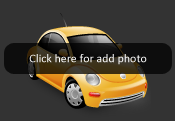
<style>
.page{position:relative;width:175px;height:121px;background:#333333}
.page>*{position:absolute;margin:0}
.t1{font:12px "Calibri";color:#ffffff}
</style>
<div class="page">
<p class="t1" style="left:29px;top:54px;width:118px;height:11px">Click here for add photo</p>
</div>
